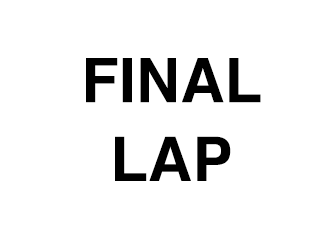
<style>
.page{position:relative;width:320px;height:240px;background:#ffffff}
.page>*{position:absolute;margin:0}
.t1{font:61.3px/78.7px "Helvetica-Bold";color:#000000}
</style>
<div class="page">
<p class="t1" style="left:86px;top:58px;width:175px;height:123px;text-align:center">FINAL<br>LAP</p>
</div>
